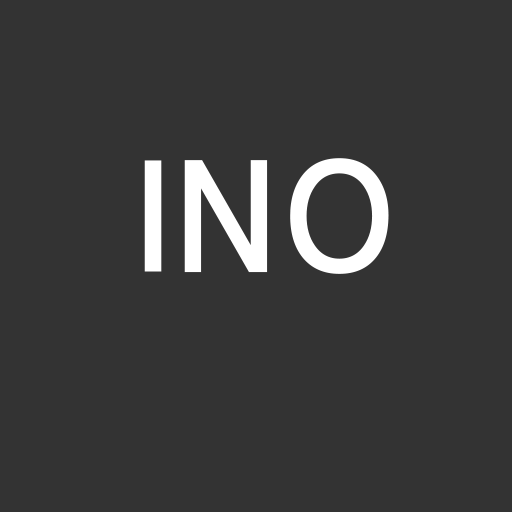
<style>
.page{position:relative;width:512px;height:512px;background:#333333}
.page>*{position:absolute;margin:0}
.t1{font:150px "JejuGothic";color:#ffffff}
</style>
<div class="page">
<p class="t1" style="left:144px;top:158px;width:245px;height:116px">INO</p>
</div>
